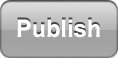
<style>
.page{position:relative;width:118px;height:58px}
.page>*{position:absolute;margin:0}
.t1{font:23.8px "Arial-BoldMT";color:#ffffff}
</style>
<div class="page">
<p class="t1" style="left:17px;top:19px;width:83px;height:19px">Publish</p>
</div>
